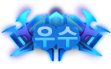
<style>
.page{position:relative;width:111px;height:69px;background:#ffffff}
.page>*{position:absolute;margin:0}
.t1{font:22px "MalgunGothicBold";font-weight:bold}
</style>
<div class="page">
<p class="t1" style="left:35px;top:26px;width:43px;height:22px">우수</p>
</div>
